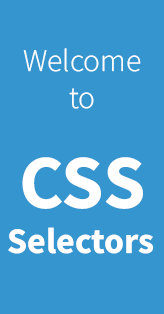
<style>
.page{position:relative;width:164px;height:314px;background:#3595cf}
.page>*{position:absolute;margin:0}
.t1{font:31.5px "SourceSansRoman-Light";color:#ffffff}
.t2{font:76.6px "SourceSansRoman-Bold";color:#ffffff}
.t3{font:36px "SourceSansRoman-Bold";color:#ffffff}
</style>
<div class="page">
<p class="t1" style="left:23px;top:48px;width:118px;height:24px">Welcome</p>
<p class="t1" style="left:69px;top:88px;width:25px;height:21px">to</p>
<p class="t2" style="left:22px;top:157px;width:121px;height:52px">CSS</p>
<p class="t3" style="left:8px;top:227px;width:146px;height:27px">Selectors</p>
</div>
